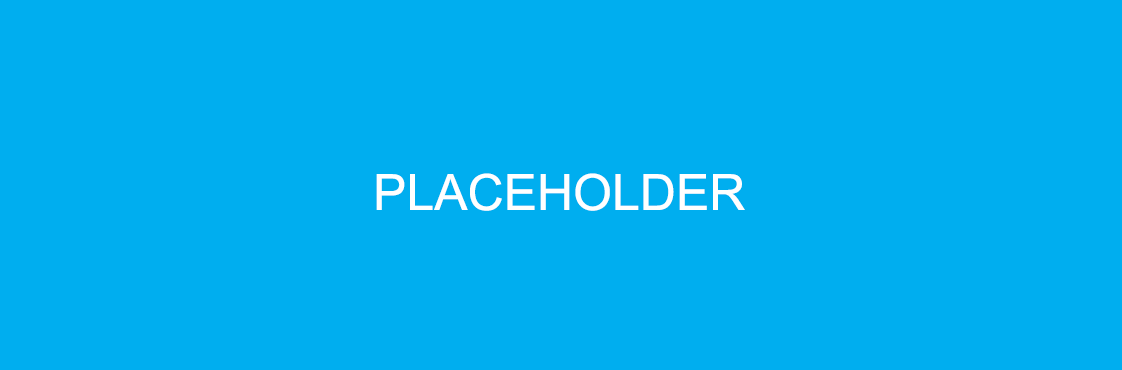
<style>
.page{position:relative;width:1122px;height:370px;background:#00aeef}
.page>*{position:absolute;margin:0}
.t1{font:50px "ArialMT";color:#ffffff}
</style>
<div class="page">
<p class="t1" style="left:376px;top:173px;width:369px;height:38px">PLACEHOLDER</p>
</div>
